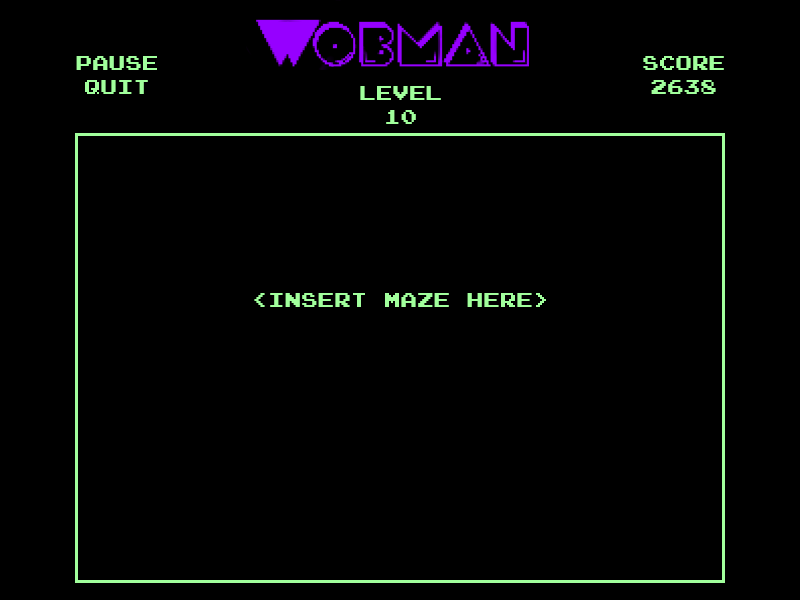
<style>
.page{position:relative;width:800px;height:600px;background:#000000}
.page>*{position:absolute;margin:0}
.t1{font:20px "JoystixMonospace-Regular";color:#a1ff9c}
</style>
<div class="page">
<p class="t1" style="left:76px;top:56px;width:81px;height:38px;text-align:center">PAUSE<br>QUIT</p>
<p class="t1" style="left:643px;top:56px;width:81px;height:38px;text-align:center">Score<br>2638</p>
<p class="t1" style="left:360px;top:86px;width:81px;height:38px;text-align:center">LEVEL<br>10</p>
<p class="t1" style="left:254px;top:293px;width:292px;height:14px">&lt;INSERT MAZE HERE&gt;</p>
</div>
